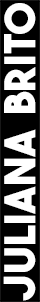
<style>
.page{position:relative;width:40px;height:302px;background:#000000}
.page>*{position:absolute;margin:0}
.t1{font:42.3px "TheBoldFont";color:#ffffff}
</style>
<div class="page">
<p class="t1" style="left:3px;top:3px;width:33px;height:298px;rotate:-90deg">JULIANA  BRITO</p>
</div>
